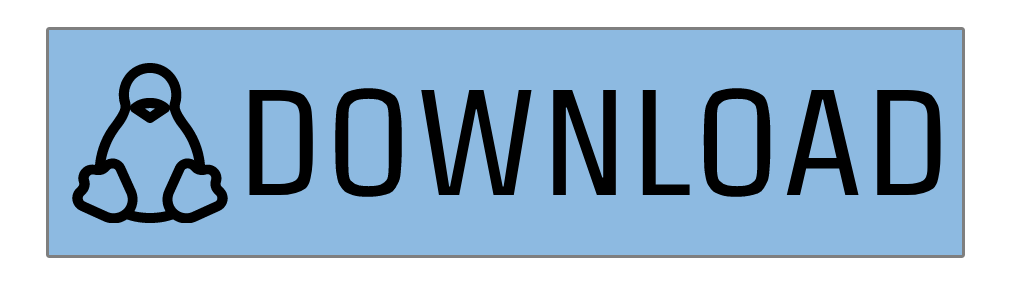
<style>
.page{position:relative;width:1012px;height:286px;background:#8dbae1}
.page>*{position:absolute;margin:0}
.t1{font:150px "Strait-Regular";color:#000000}
</style>
<div class="page">
<p class="t1" style="left:249px;top:88px;width:692px;height:109px">DOWNLOAD</p>
</div>
